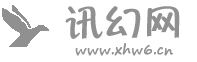
<style>
.page{position:relative;width:197px;height:62px;background:#ffffff}
.page>*{position:absolute;margin:0}
.t1{font:40px "Ftiebihei";color:#909090}
.t2{font:13.3px "SegoePrint";color:#909090;font-weight:bold}
</style>
<div class="page">
<p class="t1" style="left:65px;top:6px;width:115px;height:33px">讯幻网</p>
<p class="t2" style="left:75px;top:43px;width:98px;height:13px">www.xhw6.cn</p>
</div>
